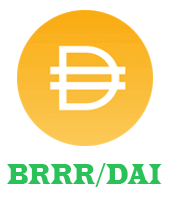
<style>
.page{position:relative;width:178px;height:200px;background:#ffffff}
.page>*{position:absolute;margin:0}
.t1{font:30px "LatinWide";color:#2ac158;scale:0.5 1}
</style>
<div class="page">
<p class="t1" style="left:7px;top:163px;width:155px;height:24px">BRRR/DAI</p>
</div>
